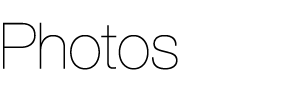
<style>
.page{position:relative;width:300px;height:100px;background:#ffffff}
.page>*{position:absolute;margin:0}
.t1{font:64px "HelveticaNeue-UltraLight";color:#000000}
</style>
<div class="page">
<p class="t1" style="left:3px;top:22px;width:175px;height:48px">Photos</p>
</div>
